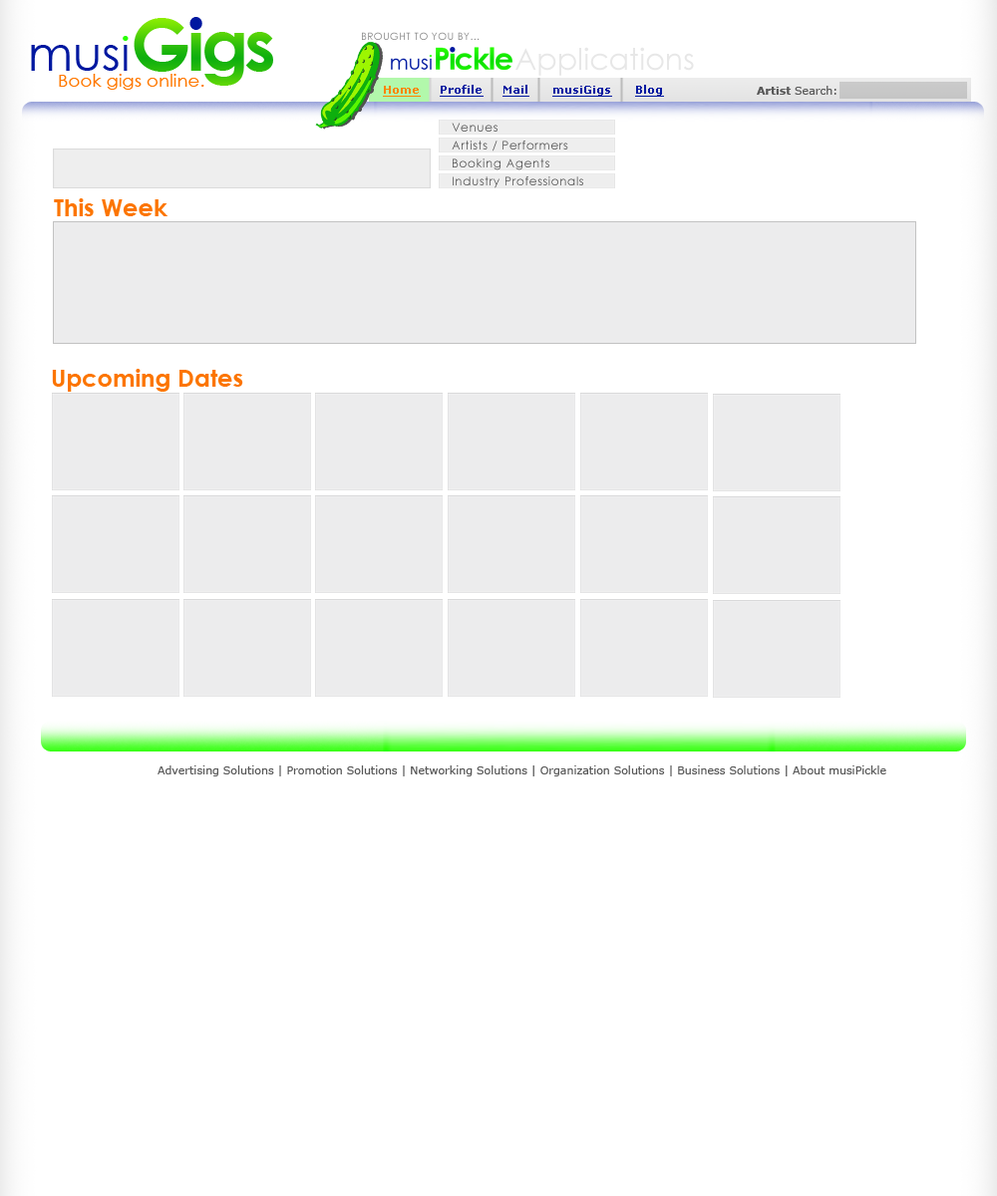
<style>
.page{position:relative;width:997px;height:1196px;background:#ffffff}
.page>*{position:absolute;margin:0}
.t1{font:10px "CenturyGothic";letter-spacing:0.05em;color:#878787}
.t2{font:29.9px "CenturyGothic";color:#e7e7e7}
.t3{font:17.1px "CenturyGothic";color:#ff7800;scale:1.07 1}
.t4{font:11px "Verdana-Bold";color:#0018a0;text-decoration:underline}
.t5{font:11px "Verdana-Bold";color:#0018a0}
.t6{font:11px "Verdana-Bold";color:#ff8400;text-decoration:underline}
.t7{font:11px "Verdana";color:#585858}
.t8{font:11px "Verdana-Bold";color:#585858}
.t9{font:12px/17.9px "CenturyGothic";letter-spacing:0.05em;color:#515151}
</style>
<div class="page">
<p class="t1" style="left:362px;top:32px;width:117px;height:8px">BROUGHT TO YOU BY...</p>
<p class="t2" style="left:515px;top:47px;width:179px;height:29px">Applications</p>
<p class="t3" style="left:59px;top:74px;width:145px;height:16px">Book gigs online.</p>
<p class="t4" style="left:383px;top:85px;width:281px;height:12px"><span class="t5"> </span><span class="t6">Home     </span>Profile     Mail      musiGigs      Blog</p>
<p class="t7" style="left:757px;top:86px;width:79px;height:9px"><span class="t8">Artist </span>Search:</p>
<p class="t9" style="left:452px;top:123px;width:131px;height:65px">Venues<br>Artists / Performers<br>Booking Agents<br>Industry Professionals</p>
<p class="t7" style="left:158px;top:766px;width:728px;height:11px">Advertising Solutions | Promotion Solutions | Networking Solutions | Organization Solutions | Business Solutions | About musiPickle</p>
</div>
